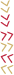
<style>
.page{position:relative;width:14px;height:75px;background:#ffffff}
.page>*{position:absolute;margin:0}
.t1{font:16px "ThrowMyHandsUpintheAir";color:#d0b571;text-transform:uppercase}
.t2{font:16px "ThrowMyHandsUpintheAir";color:#c02b43;text-transform:uppercase}
</style>
<div class="page">
<p class="t1" style="left:0px;top:0px;width:10px;height:13px;rotate:90deg">&gt;&gt;</p>
<p class="t2" style="left:0px;top:14px;width:10px;height:13px;rotate:90deg">&gt;&gt;</p>
<p class="t2" style="left:0px;top:31px;width:14px;height:10px">&gt;&gt;</p>
<p class="t2" style="left:0px;top:54px;width:14px;height:9px;rotate:-180deg">&gt;&gt;</p>
<p class="t1" style="left:0px;top:42px;width:14px;height:10px">&gt;&gt;</p>
<p class="t1" style="left:0px;top:65px;width:14px;height:9px;rotate:-180deg">&gt;&gt;</p>
</div>
